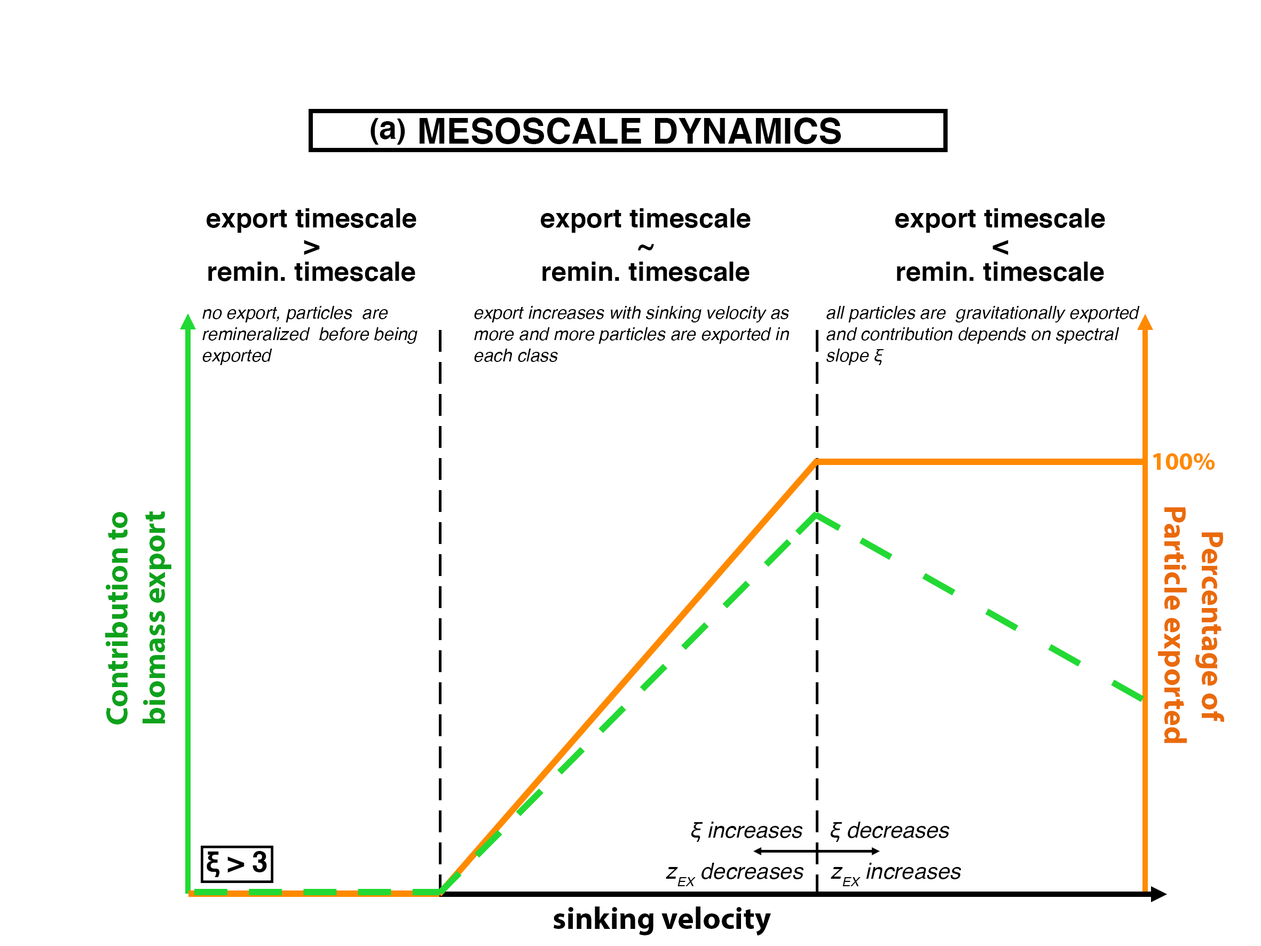
<style>
.page{position:relative;width:1261px;height:946px;background:#ffffff}
.page>*{position:absolute;margin:0}
.t1{font:28.4px "Helvetica-Bold";color:#000000}
.t2{font:31.5px "Helvetica-Bold";color:#000000}
.t3{font:35.6px "Helvetica-Bold";color:#000000}
.t4{font:26.7px/26.7px "Helvetica-Bold";color:#000000}
.t5{font:17.8px "Helvetica-Oblique";color:#000000}
.t6{font:25.2px "MyriadPro-Bold";color:#ff8a00}
.t7{font:31px "MyriadPro-Bold";color:#ea6a0a}
.t8{font:31.1px "MyriadPro-Bold";color:#0da21b}
.t9{font:22.2px "Helvetica-Oblique";color:#000000}
.t10{font:28.3px "Helvetica-Bold";color:#000000}
.t11{font:22.2px "Helvetica-Oblique";color:#000000;font-variant:small-caps}
.t12{font:31.1px "MyriadPro-Bold";color:#000000}
</style>
<div class="page">
<p class="t1" style="left:370px;top:118px;width:35px;height:27px">(<span class="t2">a</span>)</p>
<p class="t3" style="left:419px;top:117px;width:422px;height:27px">MESOSCALE DYNAMICS</p>
<p class="t4" style="left:207px;top:208px;width:209px;height:73px;text-align:center">export timescale<br>&gt;<br>remin. timescale</p>
<p class="t4" style="left:541px;top:208px;width:209px;height:73px;text-align:center">export timescale<br>~<br>remin. timescale</p>
<p class="t4" style="left:895px;top:208px;width:210px;height:73px;text-align:center">export timescale<br>&lt;<br>remin. timescale</p>
<p class="t5" style="left:202px;top:306px;width:215px;height:59px">no export, particles  are <br>remineralized  before being <br>exported</p>
<p class="t5" style="left:474px;top:306px;width:315px;height:56px">export increases with sinking velocity as <br>more and more particles are exported in <br>each class</p>
<p class="t5" style="left:826px;top:306px;width:314px;height:59px">all particles are  gravitationally exported <br>and contribution depends on spectral <br>slope ξ</p>
<p class="t6" style="left:1153px;top:453px;width:62px;height:17px">100%</p>
<p class="t7" style="left:1158px;top:507px;width:66px;height:236px;rotate:90deg">Percentage of <br>Particle exported</p>
<p class="t8" style="left:105px;top:511px;width:66px;height:213px;rotate:-90deg">Contribution to <br>biomass export</p>
<p class="t9" style="left:691px;top:821px;width:111px;height:21px">ξ increases</p>
<p class="t9" style="left:830px;top:821px;width:119px;height:21px">ξ decreases</p>
<p class="t10" style="left:207px;top:851px;width:60px;height:26px">ξ &gt; 3</p>
<p class="t9" style="left:666px;top:863px;width:137px;height:23px">z<span class="t11">EX</span> decreases</p>
<p class="t9" style="left:831px;top:863px;width:130px;height:23px">z<span class="t11">EX</span> increases</p>
<p class="t12" style="left:553px;top:906px;width:218px;height:30px">sinking velocity</p>
</div>
